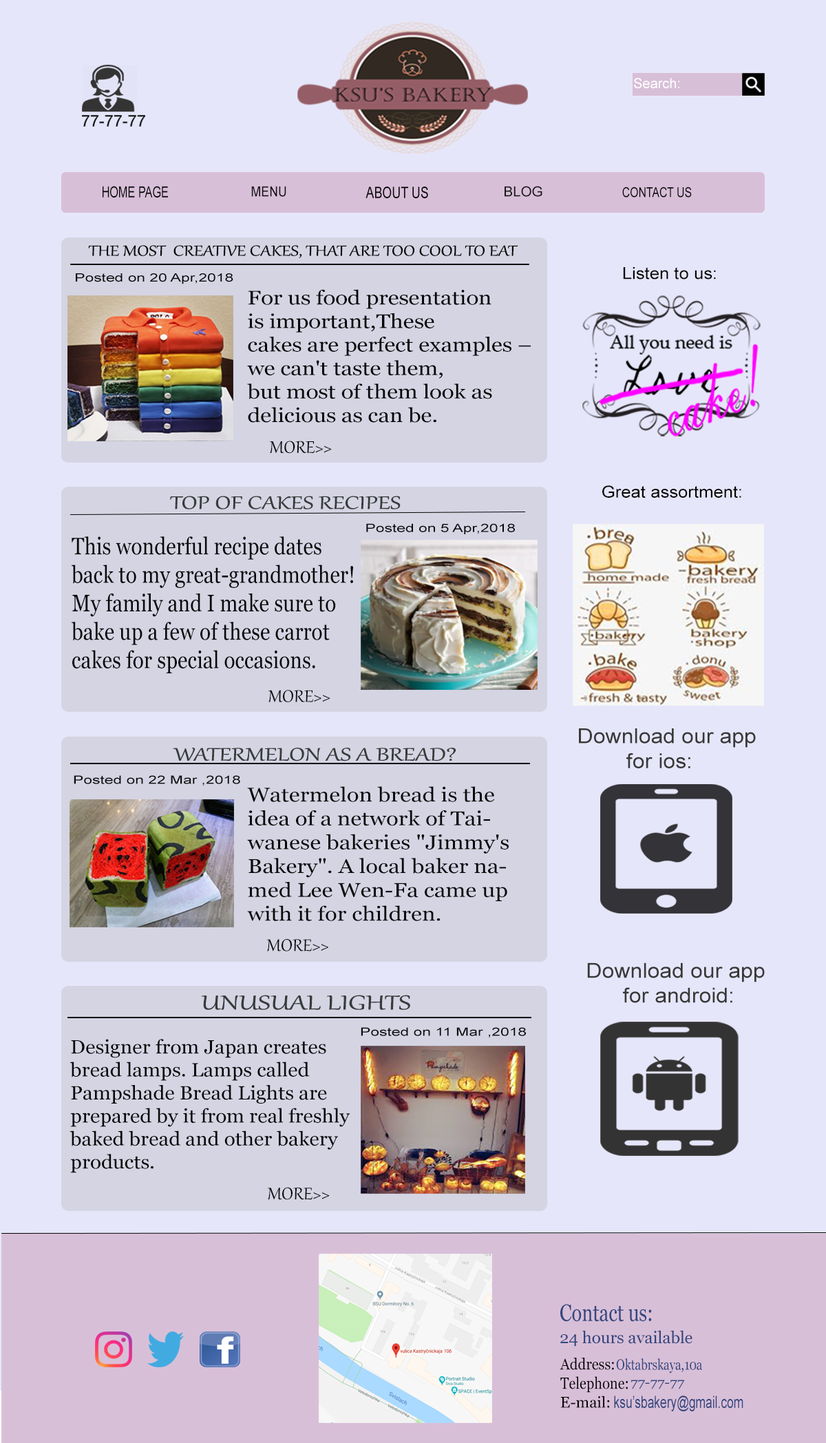
<style>
.page{position:relative;width:826px;height:1443px;background:#e6e6fa}
.page>*{position:absolute;margin:0}
.t1{font:13.8px "ArialMT";color:#ffffff}
.t2{font:15.3px "ArialMT";color:#050505;scale:0.73 1}
.t3{font:19.1px "ClarendonBT-Roman";color:#050505;scale:0.73 1}
.t4{font:13.8px "ArialMT";color:#121212;scale:0.89 1}
.t5{font:13.7px "ArialMT";color:#171717;scale:1.03 1}
.t6{font:15.9px "ArialMT";color:#050505;scale:0.78 1}
.t7{font:13.5px "ArialMT";color:#080808;scale:0.8 1}
.t8{font:18px "Gabriola";color:#070808;scale:1.22 1}
.t9{font:16.6px "ArialMT";color:#050505;scale:1.07 1}
.t10{font:11.5px "ArialMT";color:#070808;scale:1.37 1}
.t11{font:11.5px "Gabriola";color:#070808;scale:1.37 1}
.t12{font:19.6px "Georgia";color:#050505;scale:1.15 1}
.t13{font:20.7px "Gabriola";color:#070808;scale:1.07 1}
.t14{font:22.2px "Gabriola";color:#373b3a;scale:1.34 1}
.t15{font:23.7px "Georgia";color:#070808;scale:0.87 1}
.t16{font:20.7px "ArialMT";color:#383838;scale:1.07 1}
.t17{font:19.9px "Georgia";color:#070808;scale:1.14 1}
.t18{font:24.7px "Gabriola";color:#373b3a;scale:1.4 1}
.t19{font:19.2px "Georgia";color:#070808;scale:1.06 1}
.t20{font:23.5px "Georgia";color:#33467d;scale:0.8 1}
.t21{font:16.5px "Georgia";color:#33467d}
.t22{font:15.6px "Georgia";color:#050505;scale:0.9 1}
.t23{font:14.9px "Georgia";color:#33467d;scale:0.79 1}
.t24{font:16.2px "Georgia";color:#050505;scale:0.86 1}
.t25{font:12.4px "Georgia";color:#33467d;scale:1.16 1}
.t26{font:15.4px "Georgia";color:#050505}
.t27{font:16.7px "ArialMT";color:#33467d;scale:0.72 1}
</style>
<div class="page">
<p class="t1" style="left:634px;top:78px;width:46px;height:11px">Search:</p>
<p class="t2" style="left:103px;top:186px;width:65px;height:12px"><span class="t3"> </span>HOME PAGE</p>
<p class="t4" style="left:251px;top:186px;width:35px;height:11px">MENU</p>
<p class="t5" style="left:505px;top:186px;width:38px;height:11px">BLOG</p>
<p class="t6" style="left:366px;top:187px;width:62px;height:11px">ABOUT US</p>
<p class="t7" style="left:622px;top:187px;width:70px;height:11px">CONTACT US</p>
<p class="t8" style="left:88px;top:245px;width:430px;height:13px">THE MOST  CREATIVE CAKES, THAT ARE TOO COOL TO EAT</p>
<p class="t9" style="left:623px;top:267px;width:93px;height:13px">Listen to us:</p>
<p class="t10" style="left:76px;top:273px;width:157px;height:11px"><span class="t11"><br></span>Posted on 20 Apr,2018</p>
<p class="t12" style="left:247px;top:289px;width:284px;height:134px">For us food presentation <br>is important,These <br>cakes are perfect examples – <br>we can't taste them,<br>but most of them look as <br>delicious as can be.</p>
<p class="t13" style="left:269px;top:441px;width:63px;height:13px">MORE&gt;&gt;</p>
<p class="t9" style="left:602px;top:485px;width:140px;height:13px">Great assortment:</p>
<p class="t14" style="left:170px;top:496px;width:231px;height:14px">TOP OF CAKES RECIPES</p>
<p class="t10" style="left:366px;top:523px;width:149px;height:11px"><span class="t11"><br></span>Posted on 5 Apr,2018</p>
<p class="t15" style="left:71px;top:536px;width:282px;height:137px">This wonderful recipe dates <br>back to my great-grandmother! <br>My family and I make sure to <br>bake up a few of these carrot <br>cakes for special occasions.</p>
<p class="t13" style="left:268px;top:690px;width:63px;height:12px">MORE&gt;&gt;</p>
<p class="t16" style="left:579px;top:728px;width:177px;height:40px">Download our app<br>        for ios:</p>
<p class="t14" style="left:173px;top:748px;width:284px;height:14px">WATERMELON AS A BREAD?</p>
<p class="t10" style="left:74px;top:775px;width:166px;height:11px"><span class="t11"><br></span>Posted on 22 Mar ,2018</p>
<p class="t17" style="left:247px;top:786px;width:262px;height:135px">Watermelon bread is the <br>idea of ​​a network of Tai-<br>wanese bakeries "Jimmy's <br>Bakery". A local baker na-<br>med Lee Wen-Fa came up <br>with it for children.</p>
<p class="t13" style="left:266px;top:939px;width:62px;height:13px">MORE&gt;&gt;</p>
<p class="t16" style="left:587px;top:963px;width:178px;height:40px">Download our app<br>      for android:</p>
<p class="t18" style="left:201px;top:995px;width:209px;height:15px">UNUSUAL LIGHTS</p>
<p class="t10" style="left:361px;top:1027px;width:165px;height:11px"><span class="t11"><br></span>Posted on 11 Mar ,2018</p>
<p class="t19" style="left:70px;top:1039px;width:280px;height:134px">Designer from Japan creates <br>bread lamps. Lamps called<br>Pampshade Bread Lights are <br>prepared by it from real freshly <br>baked bread and other bakery <br>products.</p>
<p class="t13" style="left:267px;top:1187px;width:63px;height:13px">MORE&gt;&gt;</p>
<p class="t20" style="left:560px;top:1304px;width:92px;height:18px">Contact us:</p>
<p class="t21" style="left:560px;top:1330px;width:133px;height:17px">24 hours available</p>
<p class="t22" style="left:560px;top:1358px;width:54px;height:12px">Address:</p>
<p class="t23" style="left:616px;top:1358px;width:86px;height:16px">Oktabrskaya,10a</p>
<p class="t24" style="left:560px;top:1376px;width:68px;height:17px">Telephone:</p>
<p class="t25" style="left:631px;top:1380px;width:54px;height:9px">77-77-77</p>
<p class="t26" style="left:560px;top:1396px;width:50px;height:12px">E-mail:</p>
<p class="t27" style="left:614px;top:1396px;width:130px;height:16px">ksu’sbakery@gmail.com</p>
</div>
